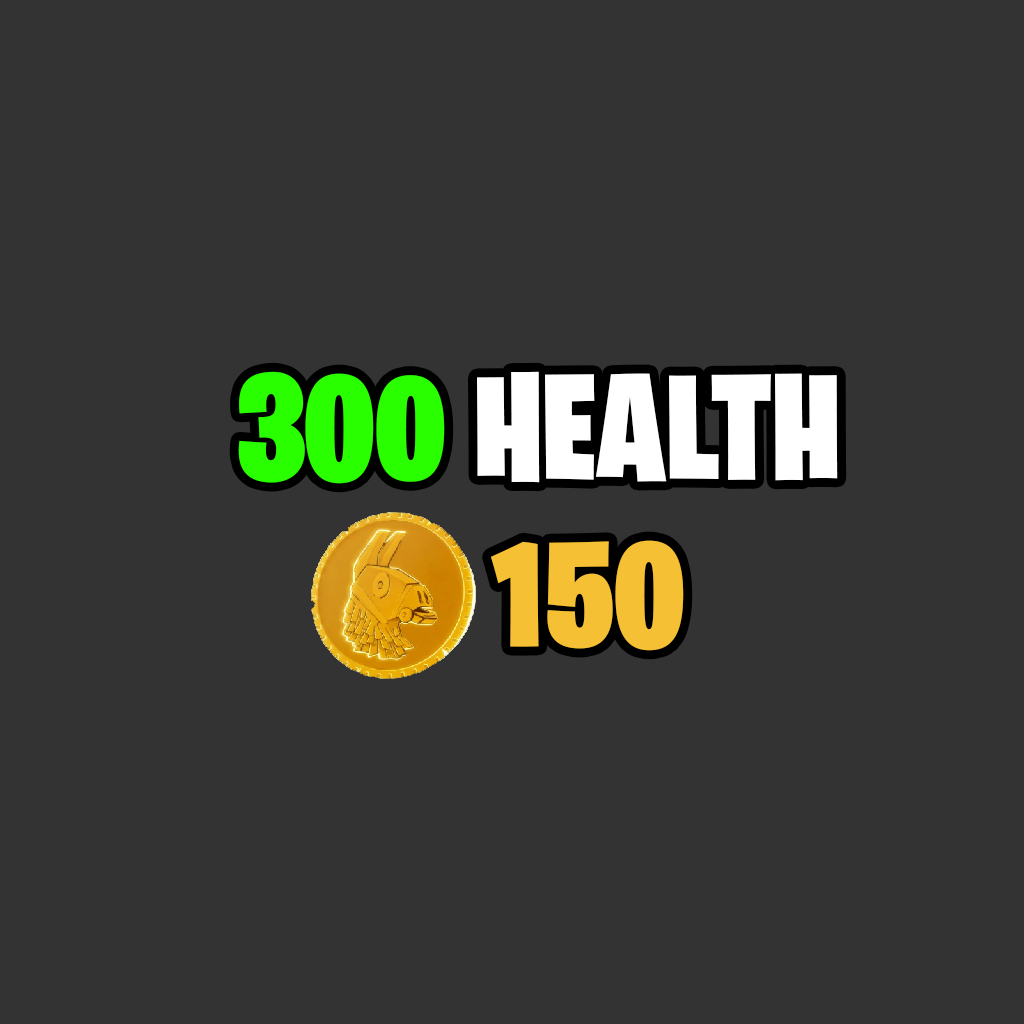
<style>
.page{position:relative;width:1024px;height:1024px;background:#333333}
.page>*{position:absolute;margin:0}
.t1{font:150px "BurbankBigCondensed-Black";color:#ffffff}
.t2{font:150px "BurbankBigCondensed-Black";color:#2aff00}
.t3{font:150px "BurbankBigCondensed-Black";color:#f5c034}
</style>
<div class="page">
<p class="t1" style="left:238px;top:371px;width:600px;height:113px"><span class="t2">300</span> HEALTH</p>
<p class="t3" style="left:491px;top:540px;width:193px;height:111px">150</p>
</div>
